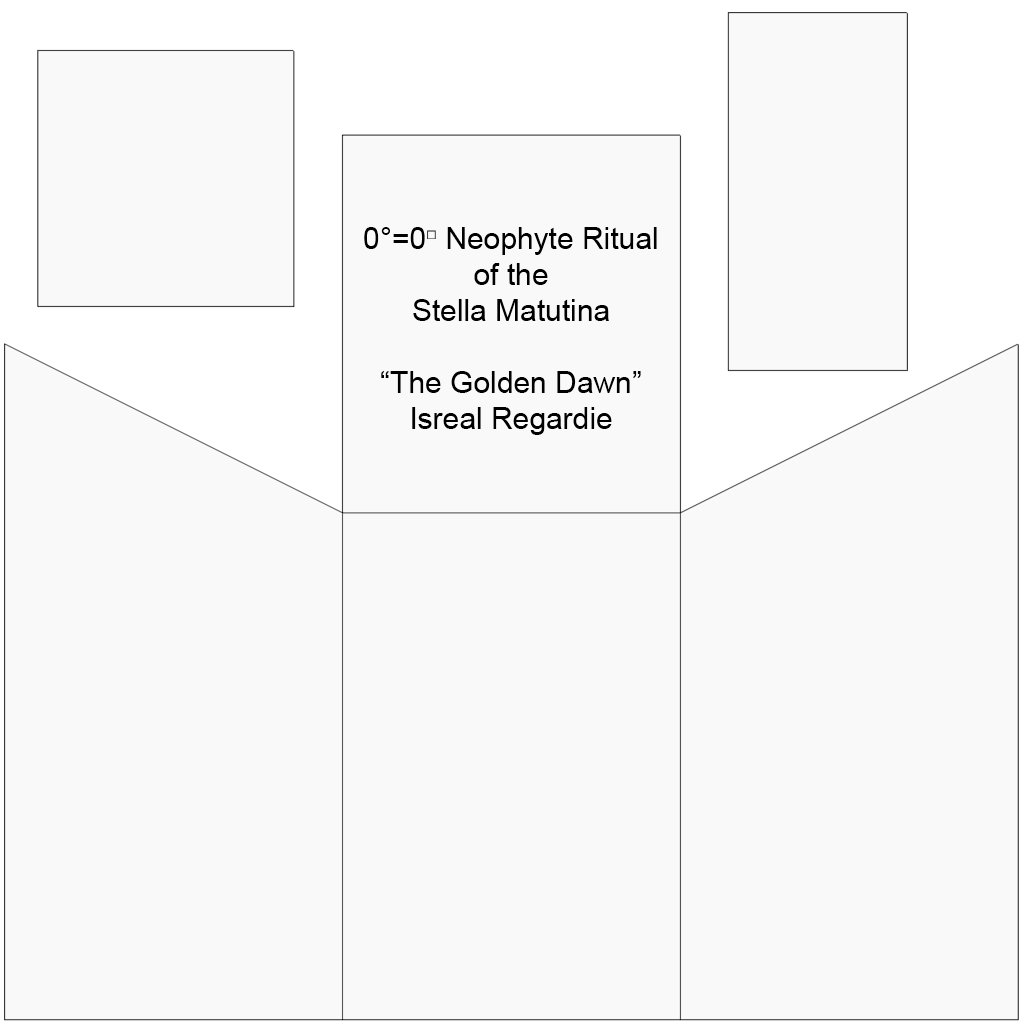
<style>
.page{position:relative;width:1024px;height:1024px;background:#f9f9f9}
.page>*{position:absolute;margin:0}
.t1{font:30px "ArialMT";color:#000000}
.t2{font:18px "ArialMT";color:#000000}
</style>
<div class="page">
<p class="t1" style="left:364px;top:227px;width:293px;height:208px;text-align:center">0°=0<span class="t2">□</span> Neophyte Ritual<br>of the<br>Stella Matutina<br><br>“The Golden Dawn”<br>Isreal Regardie</p>
</div>
